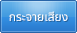
<style>
.page{position:relative;width:77px;height:33px}
.page>*{position:absolute;margin:0}
.t1{font:12px "NotoSansThai-Regular";color:#ffffff}
</style>
<div class="page">
<p class="t1" style="left:9px;top:11px;width:59px;height:10px">กระจายเสียง</p>
</div>
